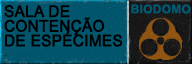
<style>
.page{position:relative;width:192px;height:64px}
.page>*{position:absolute;margin:0}
.t1{font:16px/14.7px "ArialMT";color:#000000;text-transform:uppercase;font-weight:bold;scale:0.95 1}
.t2{font:12px "Arial-BoldMT";letter-spacing:0.02em;color:#005a73;text-transform:uppercase}
</style>
<div class="page">
<p class="t1" style="left:4px;top:5px;width:119px;height:42px">Sala de<br>contenção<br>de espécimes</p>
<p class="t2" style="left:131px;top:4px;width:60px;height:10px">BIODOMO</p>
</div>
